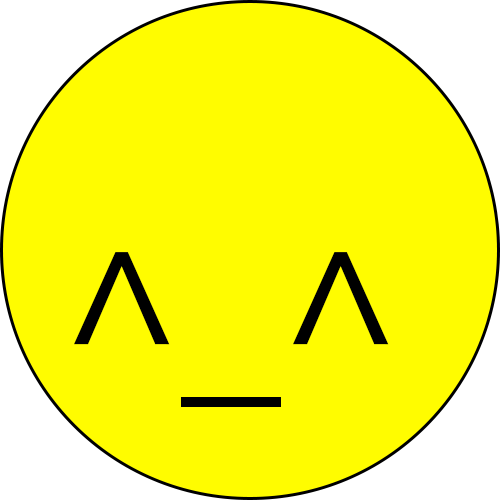
<style>
.page{position:relative;width:500px;height:500px;background:#fffc00}
.page>*{position:absolute;margin:0}
.t1{font:200px "MyriadPro-Regular";color:#000000}
</style>
<div class="page">
<p class="t1" style="left:74px;top:252px;width:315px;height:155px">^_^</p>
</div>
